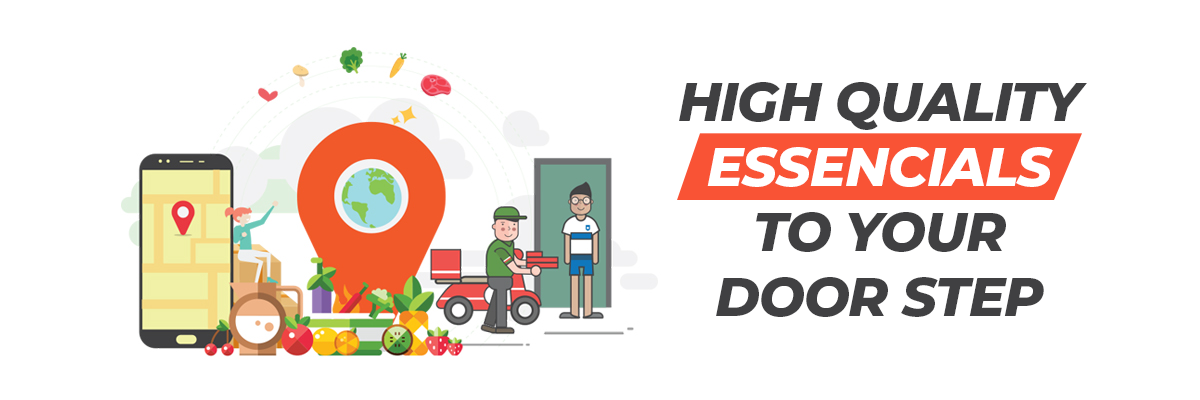
<style>
.page{position:relative;width:1200px;height:400px;background:#ffffff}
.page>*{position:absolute;margin:0}
.t1{font:54.2px "Montserrat-ExtraBoldItalic";letter-spacing:-0.02em;color:#404042;text-transform:uppercase}
.t2{font:54.2px "Montserrat-ExtraBoldItalic";letter-spacing:-0.02em;color:#ffffff;text-transform:uppercase}
</style>
<div class="page">
<p class="t1" style="left:679px;top:82px;width:408px;height:235px;text-align:center">high quality<br><span class="t2">essencials<br></span>to your<br>door step</p>
</div>
